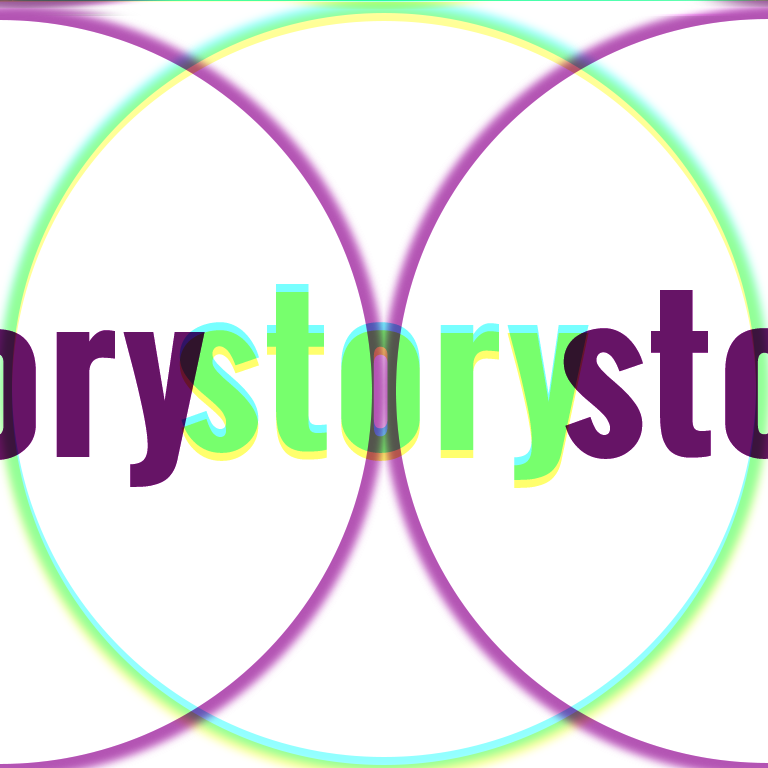
<style>
.page{position:relative;width:768px;height:768px;background:#ffffff}
.page>*{position:absolute;margin:0}
.t1{font:196px "Oswald-Bold";letter-spacing:0.025em;color:#77ff6d}
</style>
<div class="page">
<p class="t1" style="left:179px;top:283px;width:410px;height:196px">story</p>
</div>
